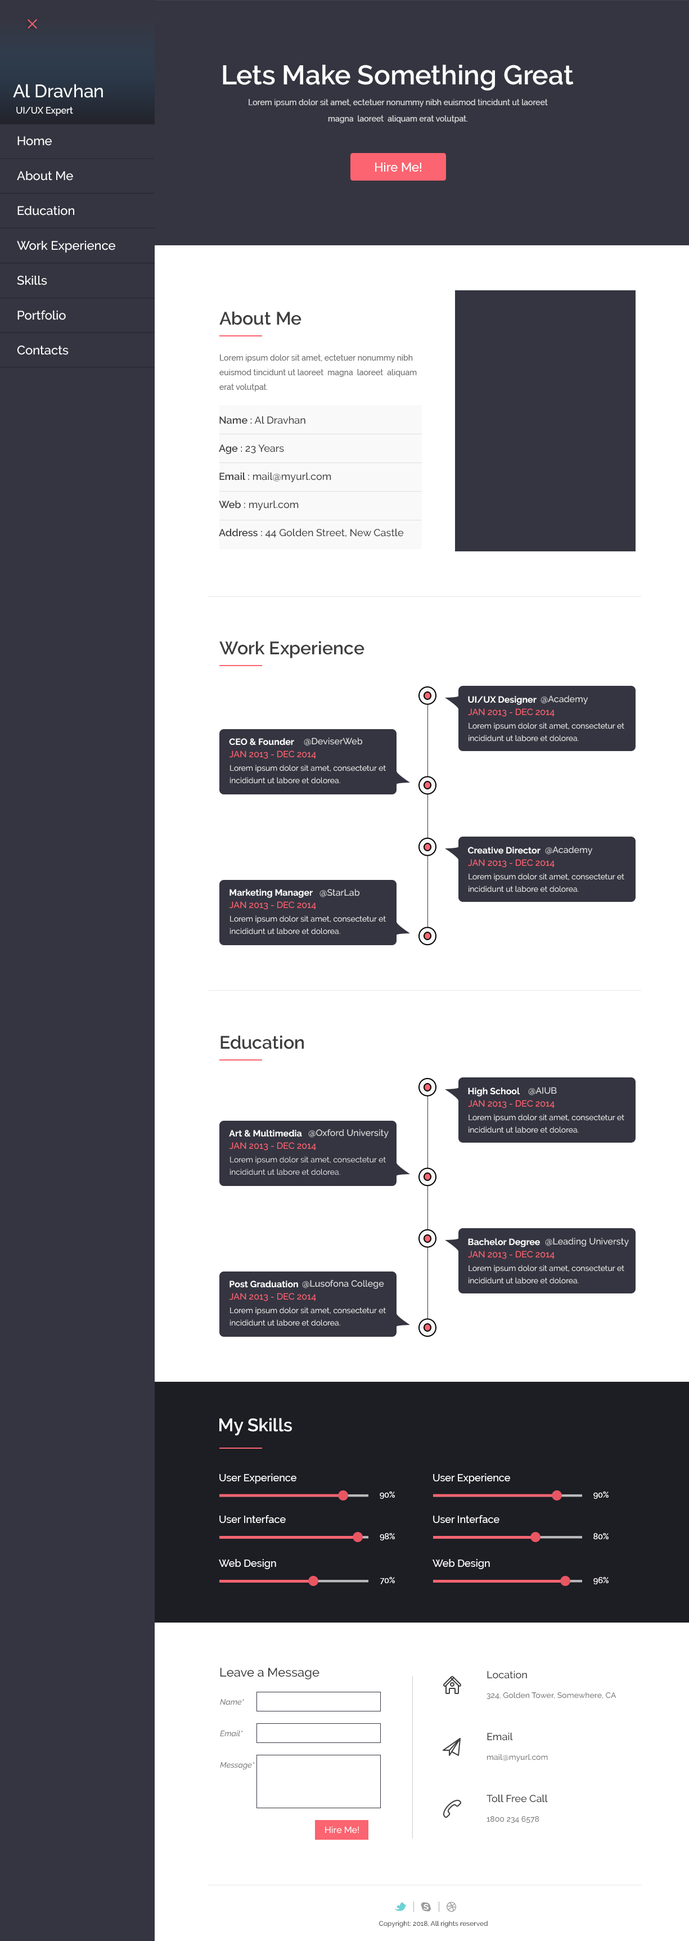
<style>
.page{position:relative;width:689px;height:1941px;background:#ffffff}
.page>*{position:absolute;margin:0}
.t1{font:27px "Raleway-SemiBold";color:#ffffff}
.t2{font:18px "Raleway-Medium";color:#ffffff}
.t3{font:7.9px/16.3px "Raleway-Medium";color:#d8d8da}
.t4{font:9px "Raleway-Medium";color:#ffffff}
.t5{font:9px "Raleway-Medium";color:#ffffff;text-transform:uppercase}
.t6{font:12.4px/34.9px "Raleway-Medium";color:#ffffff}
.t7{font:12.4px "Raleway-Medium";color:#ffffff}
.t8{font:18px "Raleway-SemiBold";color:#3e3e3e}
.t9{font:7.9px/14.6px "Raleway-Medium";color:#747474}
.t10{font:10.1px/28.1px "Raleway-Medium";color:#3e3e3e}
.t11{font:10.1px/28.1px "Raleway-SemiBold";color:#3e3e3e}
.t12{font:9px "Raleway-Bold";color:#ffffff}
.t13{font:9px "Raleway-Medium";color:#e1e1e2}
.t14{font:9px "Raleway-Medium";color:#fb6470;text-transform:uppercase}
.t15{font:7.9px/12.4px "Raleway";color:#ffffff}
.t16{font:9px "Raleway-Medium";color:#e1e1e2;text-transform:uppercase}
.t17{font:7.9px/12.4px "Raleway-Regular";color:#ffffff}
.t18{font:18px "Raleway-SemiBold";color:#ffffff}
.t19{font:10.1px "Raleway-Medium";color:#ffffff}
.t20{font:7.9px "Raleway-Medium";color:#ffffff}
.t21{font:12.4px "Raleway-Medium";color:#3e3e3e}
.t22{font:10.1px "Raleway-Medium";color:#3e3e3e}
.t23{font:7.9px "Raleway-Medium";color:#747474}
.t24{font:7.9px "Raleway-MediumItalic";color:#747474}
.t25{font:6.8px "Raleway-Medium";color:#3e3e3e}
</style>
<div class="page">
<p class="t1" style="left:223px;top:65px;width:351px;height:26px">Lets Make Something Great</p>
<p class="t2" style="left:13px;top:84px;width:90px;height:14px">Al Dravhan</p>
<p class="t3" style="left:249px;top:99px;width:299px;height:24px;text-align:center">Lorem ipsum dolor sit amet, ectetuer nonummy nibh euismod tincidunt ut laoreet  magna  laoreet  aliquam erat volutpat.</p>
<p class="t4" style="left:16px;top:107px;width:57px;height:9px"><span class="t5">Ui/ux</span> Expert</p>
<p class="t6" style="left:17px;top:136px;width:98px;height:219px">Home<br>About Me<br>Education<br>Work Experience<br>Skills<br>Portfolio<br>Contacts</p>
<p class="t7" style="left:375px;top:163px;width:46px;height:9px">Hire Me!</p>
<p class="t8" style="left:219px;top:311px;width:83px;height:14px">About Me</p>
<p class="t9" style="left:219px;top:354px;width:198px;height:38px">Lorem ipsum dolor sit amet, ectetuer nonummy nibh euismod tincidunt ut laoreet  magna  laoreet  aliquam erat volutpat.</p>
<p class="t10" style="left:219px;top:416px;width:185px;height:122px"><span class="t11">Name :</span> Al Dravhan<br><span class="t11">Age :</span> 23 Years<br><span class="t11">Email :</span> mail@myurl.com<br><span class="t11">Web :</span> myurl.com<br><span class="t11">Address :</span> 44 Golden Street, New Castle</p>
<p class="t8" style="left:219px;top:641px;width:145px;height:17px">Work Experience</p>
<p class="t12" style="left:468px;top:696px;width:69px;height:9px">UI/UX Designer</p>
<p class="t13" style="left:541px;top:695px;width:47px;height:9px">@Academy</p>
<p class="t14" style="left:468px;top:708px;width:87px;height:9px">Jan 2013 - Dec 2014</p>
<p class="t15" style="left:469px;top:722px;width:155px;height:19px">Lorem ipsum dolor sit amet, consectetur et incididunt ut labore et dolorea.</p>
<p class="t13" style="left:304px;top:737px;width:59px;height:9px"><span class="t16">@</span>DeviserWeb</p>
<p class="t12" style="left:229px;top:738px;width:65px;height:7px">CEO &amp; Founder</p>
<p class="t14" style="left:230px;top:750px;width:86px;height:9px">Jan 2013 - Dec 2014</p>
<p class="t15" style="left:230px;top:764px;width:156px;height:20px">Lorem ipsum dolor sit amet, consectetur et incididunt ut labore et dolorea.</p>
<p class="t13" style="left:545px;top:846px;width:48px;height:9px">@Academy</p>
<p class="t12" style="left:468px;top:847px;width:73px;height:7px">Creative Director</p>
<p class="t14" style="left:468px;top:859px;width:87px;height:8px">Jan 2013 - Dec 2014</p>
<p class="t15" style="left:469px;top:873px;width:155px;height:19px">Lorem ipsum dolor sit amet, consectetur et incididunt ut labore et dolorea.</p>
<p class="t12" style="left:230px;top:889px;width:83px;height:9px">Marketing Manager</p>
<p class="t13" style="left:320px;top:889px;width:40px;height:8px">@StarLab</p>
<p class="t14" style="left:230px;top:901px;width:86px;height:9px">Jan 2013 - Dec 2014</p>
<p class="t15" style="left:230px;top:915px;width:156px;height:19px">Lorem ipsum dolor sit amet, consectetur et incididunt ut labore et dolorea.</p>
<p class="t8" style="left:220px;top:1035px;width:84px;height:14px">Education</p>
<p class="t12" style="left:468px;top:1087px;width:52px;height:9px">High School</p>
<p class="t13" style="left:528px;top:1087px;width:29px;height:8px">@AIUB</p>
<p class="t14" style="left:468px;top:1100px;width:87px;height:8px">Jan 2013 - Dec 2014</p>
<p class="t15" style="left:469px;top:1114px;width:155px;height:19px">Lorem ipsum dolor sit amet, consectetur et incididunt ut labore et dolorea.</p>
<p class="t12" style="left:229px;top:1130px;width:73px;height:7px">Art &amp; Multimedia</p>
<p class="t13" style="left:308px;top:1129px;width:81px;height:9px"><span class="t16">@</span>Oxford University</p>
<p class="t14" style="left:230px;top:1142px;width:86px;height:8px">Jan 2013 - Dec 2014</p>
<p class="t17" style="left:230px;top:1156px;width:156px;height:19px">Lorem ipsum dolor sit amet, consectetur et incididunt ut labore et dolorea.</p>
<p class="t12" style="left:468px;top:1238px;width:72px;height:9px">Bachelor Degree</p>
<p class="t13" style="left:545px;top:1238px;width:84px;height:8px">@Leading Universty</p>
<p class="t14" style="left:468px;top:1250px;width:87px;height:9px">Jan 2013 - Dec 2014</p>
<p class="t15" style="left:469px;top:1264px;width:155px;height:20px">Lorem ipsum dolor sit amet, consectetur et incididunt ut labore et dolorea.</p>
<p class="t12" style="left:230px;top:1280px;width:68px;height:8px">Post Graduation</p>
<p class="t13" style="left:302px;top:1280px;width:82px;height:9px">@Lusofona College</p>
<p class="t14" style="left:230px;top:1293px;width:86px;height:8px">Jan 2013 - Dec 2014</p>
<p class="t15" style="left:230px;top:1307px;width:156px;height:19px">Lorem ipsum dolor sit amet, consectetur et incididunt ut labore et dolorea.</p>
<p class="t18" style="left:219px;top:1418px;width:73px;height:18px">My Skills</p>
<p class="t19" style="left:219px;top:1473px;width:77px;height:10px">User Experience</p>
<p class="t19" style="left:433px;top:1473px;width:77px;height:10px">User Experience</p>
<p class="t20" style="left:380px;top:1491px;width:15px;height:7px">90%</p>
<p class="t20" style="left:593px;top:1491px;width:16px;height:7px">90%</p>
<p class="t19" style="left:219px;top:1515px;width:67px;height:8px">User Interface</p>
<p class="t19" style="left:433px;top:1515px;width:67px;height:8px">User Interface</p>
<p class="t20" style="left:380px;top:1533px;width:15px;height:7px">98%</p>
<p class="t20" style="left:593px;top:1533px;width:16px;height:6px">80%</p>
<p class="t19" style="left:219px;top:1559px;width:57px;height:10px">Web Design</p>
<p class="t19" style="left:433px;top:1559px;width:57px;height:10px">Web Design</p>
<p class="t20" style="left:380px;top:1577px;width:15px;height:7px">70%</p>
<p class="t20" style="left:593px;top:1577px;width:16px;height:7px">96%</p>
<p class="t21" style="left:220px;top:1667px;width:100px;height:12px">Leave a Message</p>
<p class="t22" style="left:487px;top:1670px;width:40px;height:8px">Location</p>
<p class="t23" style="left:487px;top:1691px;width:129px;height:8px">324, Golden Tower, Somewhere, CA</p>
<p class="t24" style="left:220px;top:1699px;width:24px;height:6px">Name*</p>
<p class="t24" style="left:220px;top:1730px;width:23px;height:6px">Email*</p>
<p class="t22" style="left:487px;top:1732px;width:26px;height:8px">Email</p>
<p class="t23" style="left:487px;top:1753px;width:61px;height:9px">mail@myurl.com</p>
<p class="t24" style="left:220px;top:1762px;width:35px;height:7px">Message*</p>
<p class="t22" style="left:487px;top:1794px;width:61px;height:8px">Toll Free Call</p>
<p class="t23" style="left:487px;top:1816px;width:52px;height:6px">1800 234 6578</p>
<p class="t4" style="left:325px;top:1826px;width:34px;height:7px">Hire Me!</p>
<p class="t25" style="left:379px;top:1920px;width:109px;height:7px">Copyright: 2018, All rights reserved</p>
</div>
